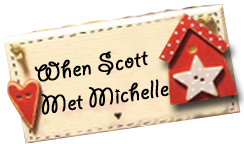
<style>
.page{position:relative;width:244px;height:144px;background:#ffffff}
.page>*{position:absolute;margin:0}
.t1{font:27.5px "GiddyupStd";color:#000000;font-weight:bold;scale:1.04 1}
</style>
<div class="page">
<p class="t1" style="left:34px;top:51px;width:135px;height:64px;rotate:-9deg">When Scott<br>Met Michelle</p>
</div>
